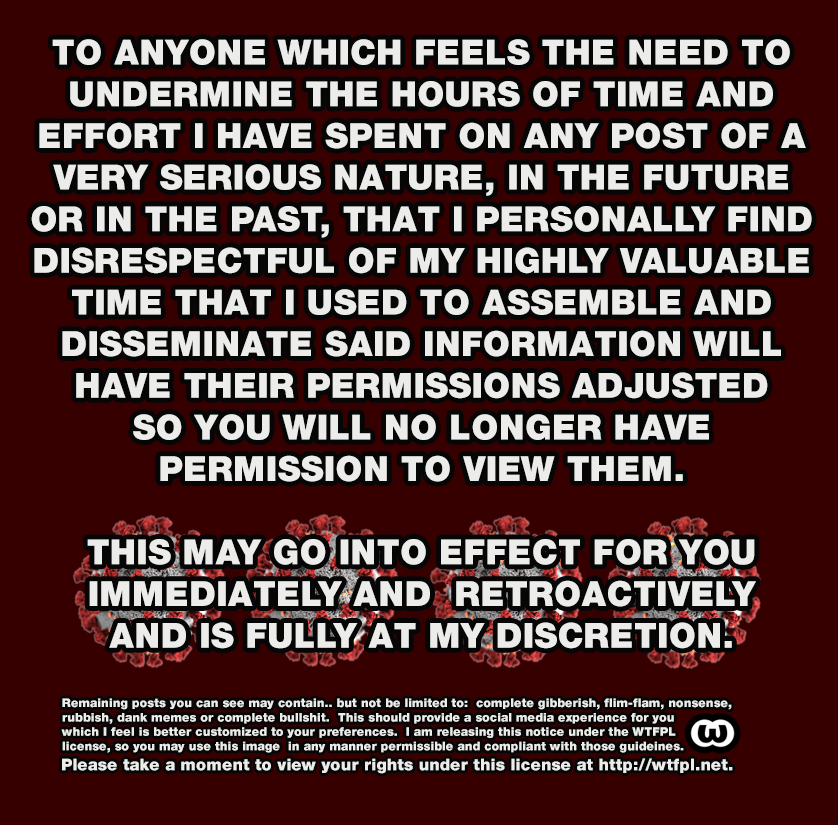
<style>
.page{position:relative;width:838px;height:825px;background:#370000}
.page>*{position:absolute;margin:0}
.t1{font:34.7px "HelveticaNeueLT-Black";color:#ecedea}
.t2{font:12px "HelveticaNeueLT-Black";color:#ecedea}
.t3{font:16.3px "HelveticaNeueLT-Black";color:#ecedea}
</style>
<div class="page">
<p class="t1" style="left:31px;top:39px;width:781px;height:610px;text-align:center">TO ANYONE WHICH FEELS THE NEED TO<br>UNDERMINE THE HOURS OF TIME AND<br>EFFORT I HAVE SPENT ON ANY POST OF A<br>VERY SERIOUS NATURE, IN THE FUTURE<br>OR IN THE PAST, THAT I PERSONALLY FIND<br>DISRESPECTFUL OF MY HIGHLY VALUABLE<br>TIME THAT I USED TO ASSEMBLE AND<br>DISSEMINATE SAID INFORMATION WILL<br>HAVE THEIR PERMISSIONS ADJUSTED<br>SO YOU WILL NO LONGER HAVE<br>PERMISSION TO VIEW THEM.<br><br>THIS MAY GO INTO EFFECT FOR YOU<br>IMMEDIATELY AND  RETROACTIVELY<br>AND IS FULLY AT MY DISCRETION.</p>
<p class="t2" style="left:61px;top:698px;width:671px;height:55px">Remaining posts you can see may contain.. but not be limited to:  complete gibberish, flim-flam, nonsense, <br>rubbish, dank memes or complete bullshit.  This should provide a social media experience for you<br>which I feel is better customized to your preferences.  I am releasing this notice under the WTFPL<br>license, so you may use this image  in any manner permissible and compliant with those guideines.</p>
<p class="t3" style="left:62px;top:758px;width:671px;height:16px">Please take a moment to view your rights under this license at http://wtfpl.net.</p>
</div>
